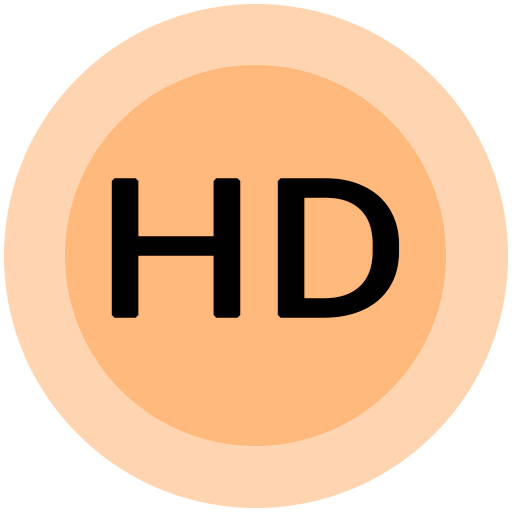
<style>
.page{position:relative;width:512px;height:512px;background:#ffb97c}
.page>*{position:absolute;margin:0}
.t1{font:187.5px "Roboto-Regular";color:#010101;font-weight:bold;scale:1.2 1}
</style>
<div class="page">
<p class="t1" style="left:111px;top:178px;width:289px;height:140px">HD</p>
</div>
